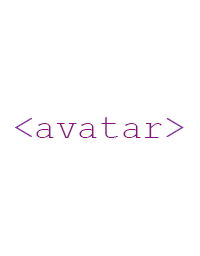
<style>
.page{position:relative;width:200px;height:256px;background:#ffffff}
.page>*{position:absolute;margin:0}
.t1{font:36px "CourierNewPSMT";color:#881280}
.t2{font:36px "CourierNewPSMT";color:#8837a3}
</style>
<div class="page">
<p class="t1" style="left:15px;top:117px;width:169px;height:21px"><span class="t2">&lt;</span>avatar<span class="t2">&gt;</span></p>
</div>
